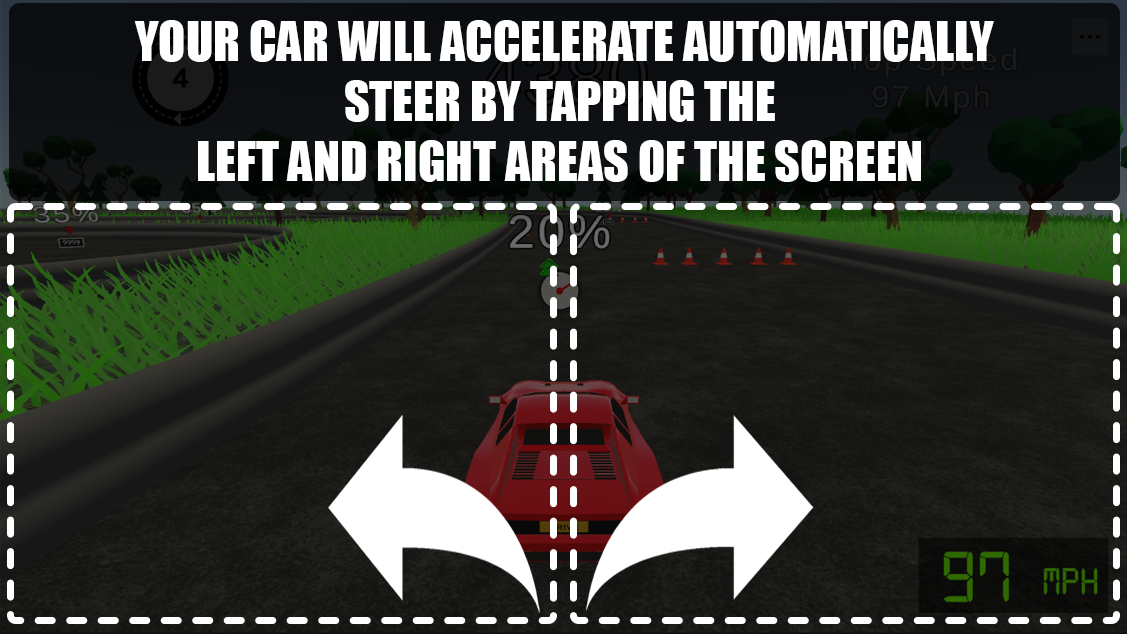
<style>
.page{position:relative;width:1127px;height:634px}
.page>*{position:absolute;margin:0}
.t1{font:50px "Impact";color:#ffffff;text-transform:uppercase}
</style>
<div class="page">
<p class="t1" style="left:134px;top:20px;width:860px;height:162px;text-align:center">Your car will accelerate automatically<br>Steer by tapping the <br>left and right areas of the screen</p>
</div>
